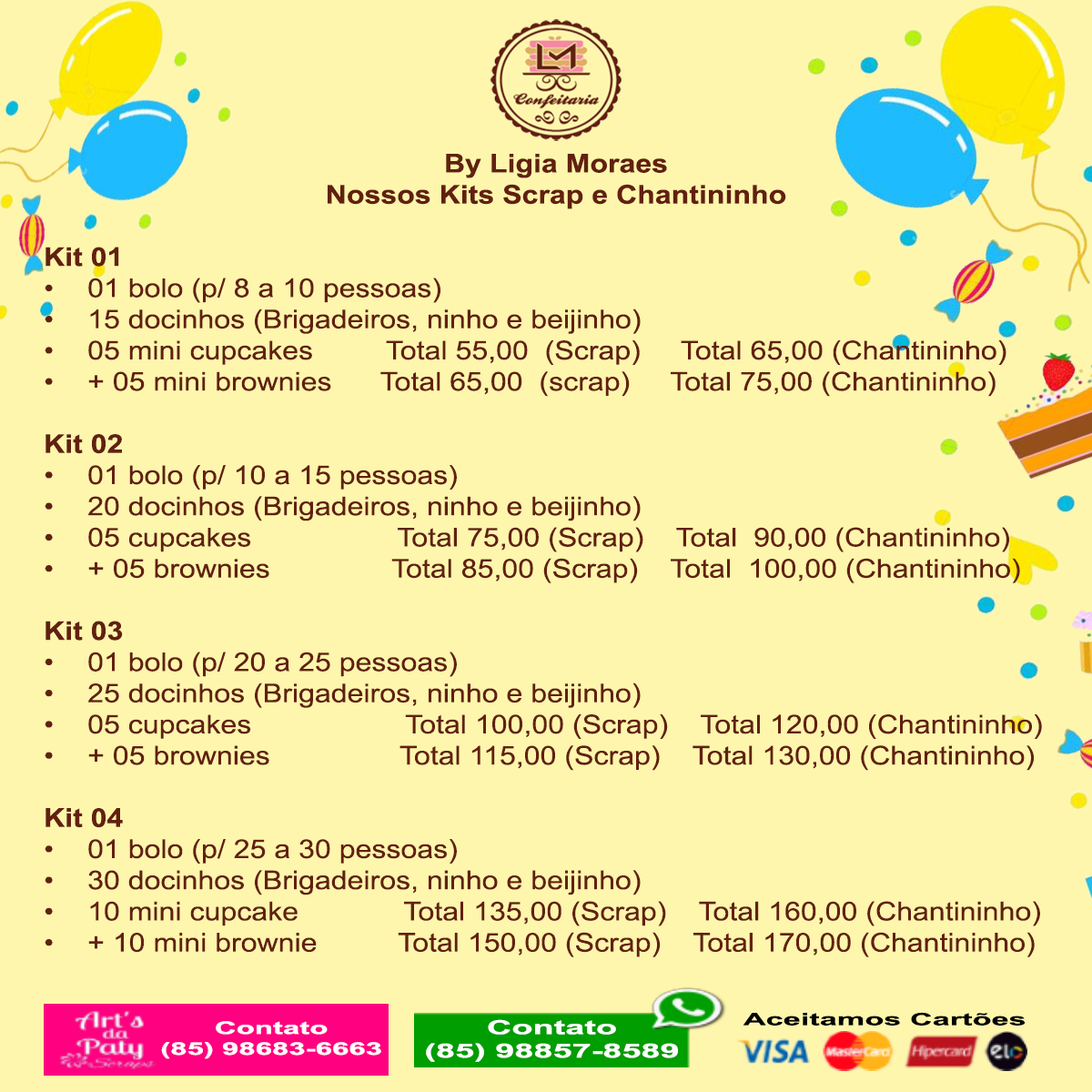
<style>
.page{position:relative;width:1092px;height:1092px;background:#fef6ad}
.page>*{position:absolute;margin:0}
.t1{font:26px "ArialMT";color:#622010;scale:1.12 1}
.t2{font:26px "Arial-BoldMT";color:#622010;scale:1.12 1}
.t3{font:17px "Arial-BoldMT";color:#010101;scale:1.83 1}
.t4{font:17.3px "Arial-BoldMT";color:#fefefe;scale:1.73 1}
.t5{font:19.5px "Arial-BoldMT";color:#fefefe;scale:1.77 1}
</style>
<div class="page">
<p class="t1" style="left:45px;top:154px;width:997px;height:803px;text-align:center"><span class="t2">By Ligia Moraes<br>Nossos Kits Scrap e Chantininho<br><br>Kit 01<br></span>• 01 bolo (p/ 8 a 10 pessoas)<br>• 15 docinhos (Brigadeiros, ninho e beijinho)<br>• 05 mini cupcakes         Total 55,00  (Scrap)     Total 65,00 (Chantininho)<br>• + 05 mini brownies      Total 65,00  (scrap)     Total 75,00 (Chantininho)<br><br><span class="t2">Kit 02</span> <br>• 01 bolo (p/ 10 a 15 pessoas)<br>• 20 docinhos (Brigadeiros, ninho e beijinho)<br>• 05 cupcakes                  Total 75,00 (Scrap)    Total  90,00 (Chantininho)<br>• + 05 brownies               Total 85,00 (Scrap)    Total  100,00 (Chantininho)<br><br><span class="t2">Kit 03<br></span>• 01 bolo (p/ 20 a 25 pessoas)<br>• 25 docinhos (Brigadeiros, ninho e beijinho)<br>• 05 cupcakes                   Total 100,00 (Scrap)    Total 120,00 (Chantininho)<br>• + 05 brownies                Total 115,00 (Scrap)    Total 130,00 (Chantininho)<br><br><span class="t2">Kit 04<br></span>• 01 bolo (p/ 25 a 30 pessoas) <br>• 30 docinhos (Brigadeiros, ninho e beijinho)<br>• 10 mini cupcake             Total 135,00 (Scrap)    Total 160,00 (Chantininho)<br>• + 10 mini brownie          Total 150,00 (Scrap)    Total 170,00 (Chantininho)</p>
<p class="t3" style="left:743px;top:1012px;width:283px;height:14px">Aceitamos Cartões</p>
<p class="t4" style="left:161px;top:1021px;width:220px;height:38px;text-align:center">Contato <br>(85) 98683-6663</p>
<p class="t5" style="left:426px;top:1019px;width:252px;height:43px;text-align:center">Contato <br>(85) 98857-8589</p>
</div>
